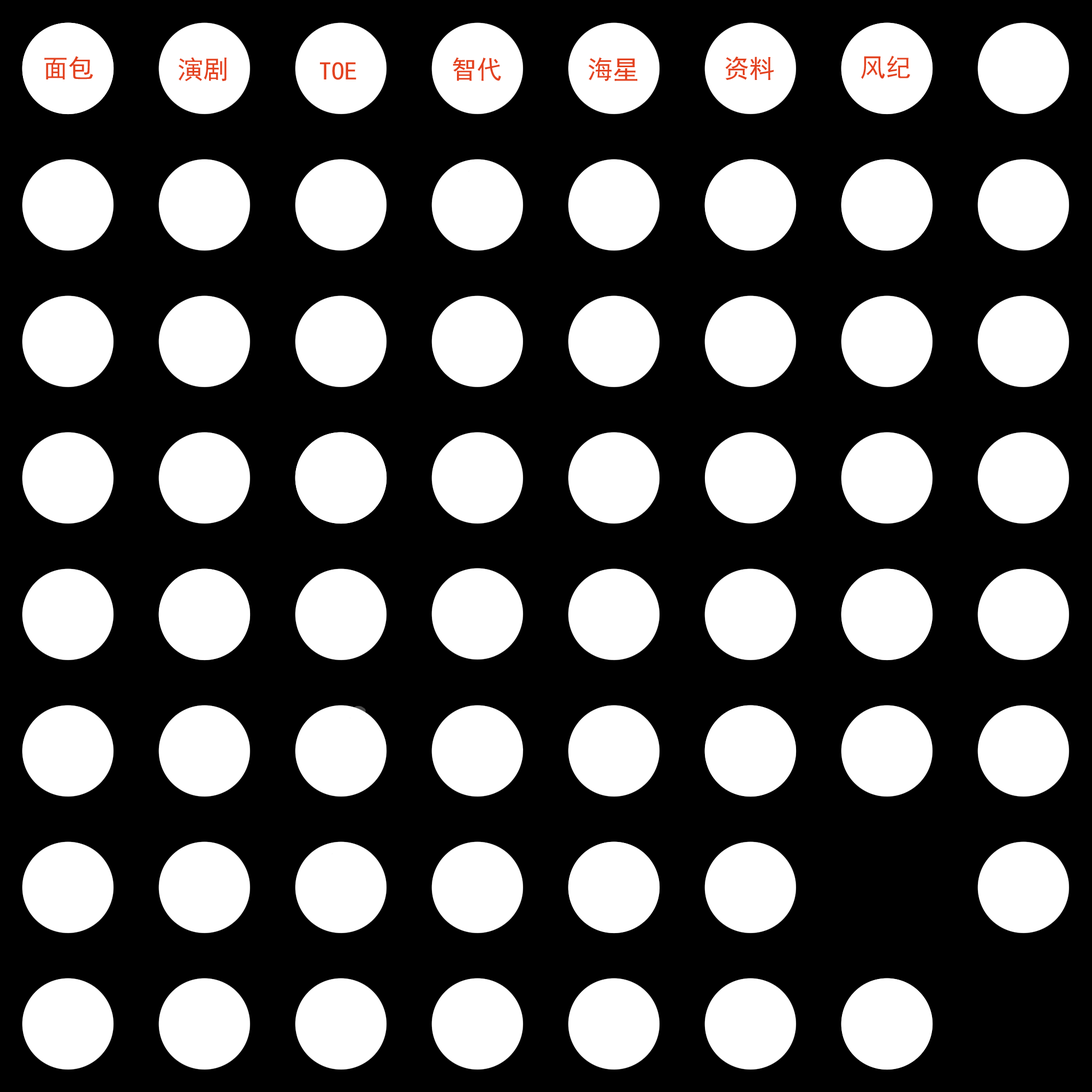
<style>
.page{position:relative;width:1092px;height:1092px;background:#000000}
.page>*{position:absolute;margin:0}
.t1{font:25.6px "SimHei";color:#e34220}
</style>
<div class="page">
<p class="t1" style="left:44px;top:56px;width:49px;height:23px">面包</p>
<p class="t1" style="left:179px;top:57px;width:48px;height:25px">演剧</p>
<p class="t1" style="left:320px;top:62px;width:36px;height:18px">TOE</p>
<p class="t1" style="left:453px;top:57px;width:48px;height:24px">智代</p>
<p class="t1" style="left:588px;top:57px;width:50px;height:24px">海星</p>
<p class="t1" style="left:725px;top:57px;width:49px;height:23px">资料</p>
<p class="t1" style="left:861px;top:55px;width:49px;height:24px">风纪</p>
</div>
